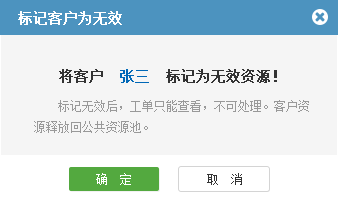
<style>
.page{position:relative;width:338px;height:202px;background:#f5f5f5}
.page>*{position:absolute;margin:0}
.t1{font:14px "SimSun";color:#ffffff;font-weight:bold}
.t2{font:14px "SimSun";color:#333333;font-weight:bold}
.t3{font:14px "SimSun";color:#0068b7;font-weight:bold}
.t4{font:12px/21px "SimSun";color:#999999}
.t5{font:12px "SimSun";color:#ffffff}
.t6{font:12px "SimSun";color:#333333}
</style>
<div class="page">
<p class="t1" style="left:18px;top:11px;width:104px;height:14px">标记客户为无效</p>
<p class="t2" style="left:59px;top:69px;width:218px;height:14px">将客户  <span class="t3">张三</span>  标记为无效资源！</p>
<p class="t4" style="left:34px;top:100px;width:275px;height:33px">标记无效后，工单只能查看，不可处理。客户资源释放回公共资源池。</p>
<p class="t5" style="left:96px;top:173px;width:35px;height:12px">确  定</p>
<p class="t6" style="left:207px;top:173px;width:35px;height:12px">取  消</p>
</div>
